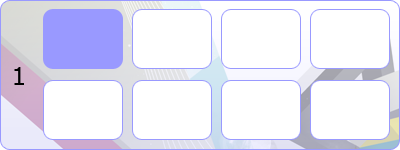
<style>
.page{position:relative;width:400px;height:150px;background:#ffffff}
.page>*{position:absolute;margin:0}
.t1{font:24px "Verdana";color:#000000}
</style>
<div class="page">
<p class="t1" style="left:14px;top:67px;width:10px;height:18px">1</p>
</div>
